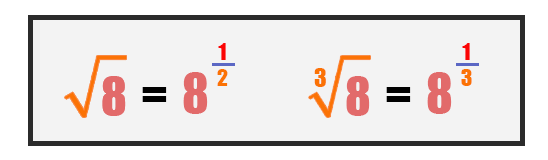
<style>
.page{position:relative;width:548px;height:160px;background:#f3f3f3}
.page>*{position:absolute;margin:0}
.t1{font:21.6px "Impact";color:#fb0404}
.t2{font:48px "Impact";color:#e26a6a}
.t3{font:50px "Impact";color:#e26a6a}
.t4{font:21.6px "Impact";color:#fb7204}
.t5{font:24px "Impact";color:#fb7204}
.t6{font:50px "Impact";color:#000000}
</style>
<div class="page">
<p class="t1" style="left:218px;top:43px;width:8px;height:17px">1</p>
<p class="t1" style="left:462px;top:43px;width:8px;height:17px">1</p>
<p class="t2" style="left:102px;top:76px;width:24px;height:40px">8</p>
<p class="t2" style="left:102px;top:76px;width:24px;height:40px">8</p>
<p class="t3" style="left:183px;top:72px;width:25px;height:42px">8</p>
<p class="t4" style="left:217px;top:69px;width:11px;height:17px">2</p>
<p class="t5" style="left:314px;top:68px;width:12px;height:19px">3</p>
<p class="t2" style="left:346px;top:76px;width:24px;height:40px">8</p>
<p class="t3" style="left:427px;top:72px;width:25px;height:42px">8</p>
<p class="t4" style="left:461px;top:69px;width:11px;height:17px">3</p>
<p class="t6" style="left:142px;top:87px;width:25px;height:15px">=</p>
<p class="t6" style="left:386px;top:87px;width:25px;height:15px">=</p>
</div>
